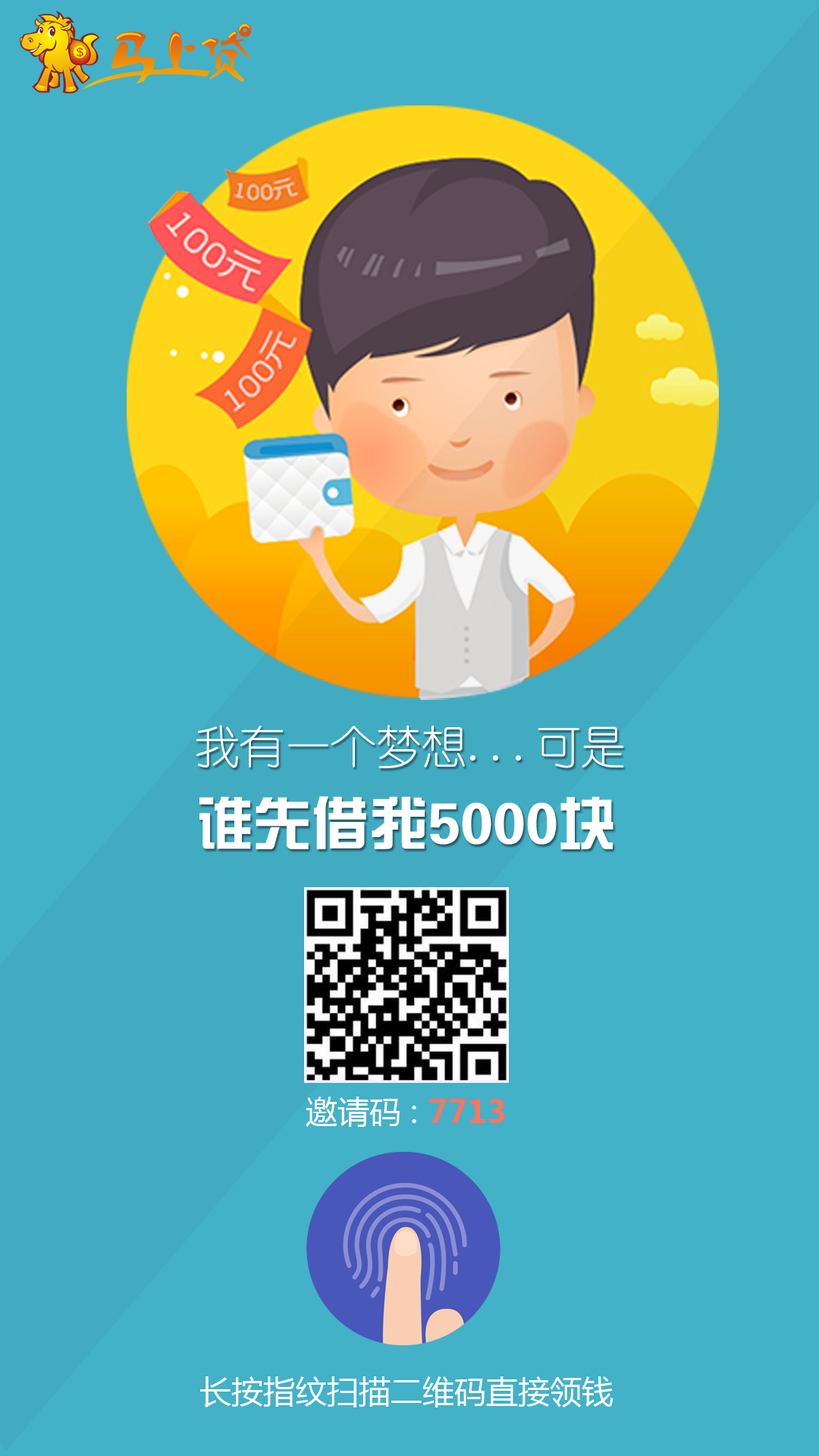
<style>
.page{position:relative;width:819px;height:1456px;background:#43b1c8}
.page>*{position:absolute;margin:0}
.t1{font:45.5px "YouYuan";color:#ffffff}
.t2{font:58.5px "FZZYJW--GB1-0";color:#ffffff}
.t3{font:31.9px "MicrosoftYaHei";color:#ffffff}
.t4{font:31.9px "MicrosoftYaHei-Bold";color:#ff745d}
</style>
<div class="page">
<p class="t1" style="left:196px;top:725px;width:428px;height:43px">我有一个梦想...可是</p>
<p class="t2" style="left:199px;top:796px;width:414px;height:53px">谁先借我5000块</p>
<p class="t3" style="left:306px;top:1097px;width:199px;height:30px">邀请码 : <span class="t4">7713</span></p>
<p class="t3" style="left:200px;top:1376px;width:413px;height:31px">长按指纹扫描二维码直接领钱</p>
</div>
